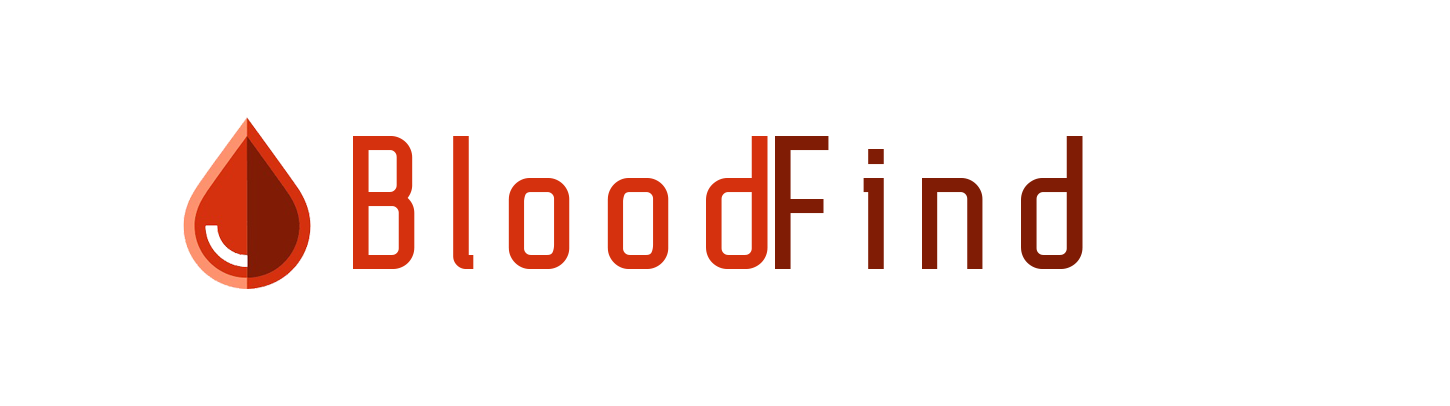
<style>
.page{position:relative;width:1450px;height:406px;background:#ffffff}
.page>*{position:absolute;margin:0}
.t1{font:175.7px "AutobusBold";letter-spacing:0.14em;color:#d5310e}
.t2{font:175.7px "AutobusBold";letter-spacing:0.14em;color:#801c05}
</style>
<div class="page">
<p class="t1" style="left:353px;top:136px;width:415px;height:133px">Blood</p>
<p class="t2" style="left:775px;top:136px;width:308px;height:133px">Find</p>
</div>
